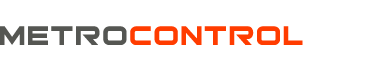
<style>
.page{position:relative;width:371px;height:71px;background:#ffffff}
.page>*{position:absolute;margin:0}
.t1{font:36px "Bitsumishi";letter-spacing:0.06em;color:#ff3c00}
.t2{font:36px "Bitsumishi";letter-spacing:0.06em;color:#555652}
</style>
<div class="page">
<p class="t1" style="left:0px;top:26px;width:303px;height:19px"><span class="t2">metro</span>control</p>
</div>
